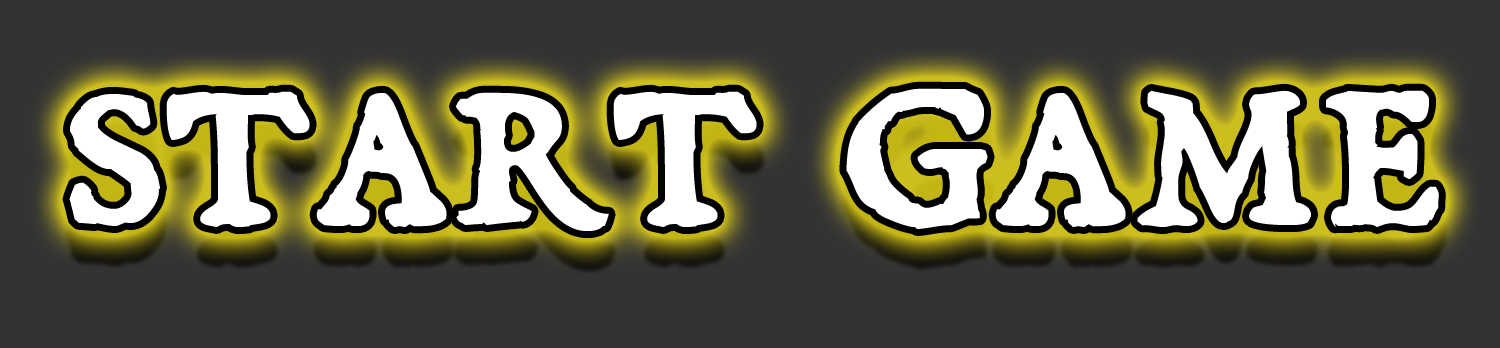
<style>
.page{position:relative;width:1500px;height:348px;background:#333333}
.page>*{position:absolute;margin:0}
.t1{font:250px "DominicanSmallCaps";color:#ffffff}
</style>
<div class="page">
<p class="t1" style="left:69px;top:88px;width:1370px;height:143px">start game</p>
</div>
